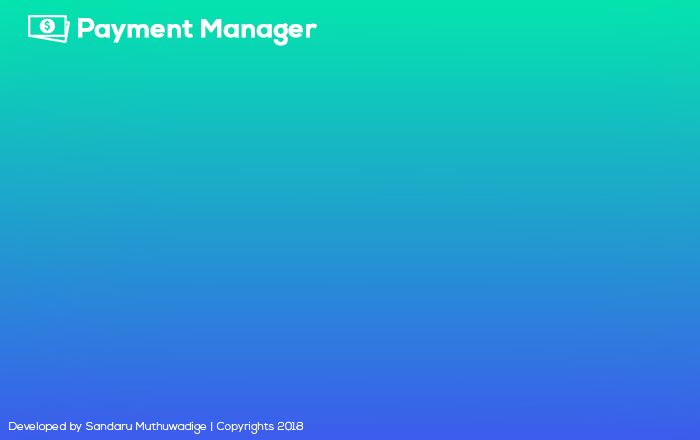
<style>
.page{position:relative;width:700px;height:440px}
.page>*{position:absolute;margin:0}
.t1{font:26.3px "NexaBold";color:#ffffff;font-weight:bold}
.t2{font:11.4px "NexaLight";letter-spacing:0.005em;color:#ffffff}
</style>
<div class="page">
<p class="t1" style="left:78px;top:18px;width:239px;height:28px">Payment Manager</p>
<p class="t2" style="left:9px;top:421px;width:295px;height:13px">Developed by Sandaru Muthuwadige | Copyrights 2018</p>
</div>
